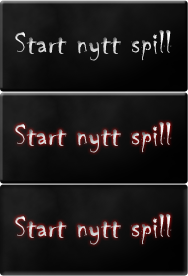
<style>
.page{position:relative;width:188px;height:276px}
.page>*{position:absolute;margin:0}
.t1{font:33.5px "Chiller-Regular";letter-spacing:0.02em}
</style>
<div class="page">
<p class="t1" style="left:15px;top:30px;width:157px;height:31px">Start nytt spill</p>
<p class="t1" style="left:15px;top:122px;width:157px;height:31px">Start nytt spill</p>
<p class="t1" style="left:15px;top:214px;width:157px;height:31px">Start nytt spill</p>
</div>
